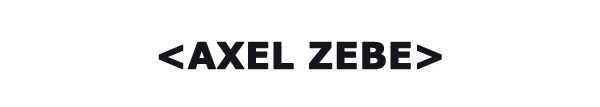
<style>
.page{position:relative;width:600px;height:107px;background:#ffffff}
.page>*{position:absolute;margin:0}
.t1{font:36px "Verdana-Bold";color:#18141c;text-transform:uppercase;font-weight:bold}
</style>
<div class="page">
<p class="t1" style="left:158px;top:41px;width:284px;height:29px">&lt;Axel zebe&gt;</p>
</div>
